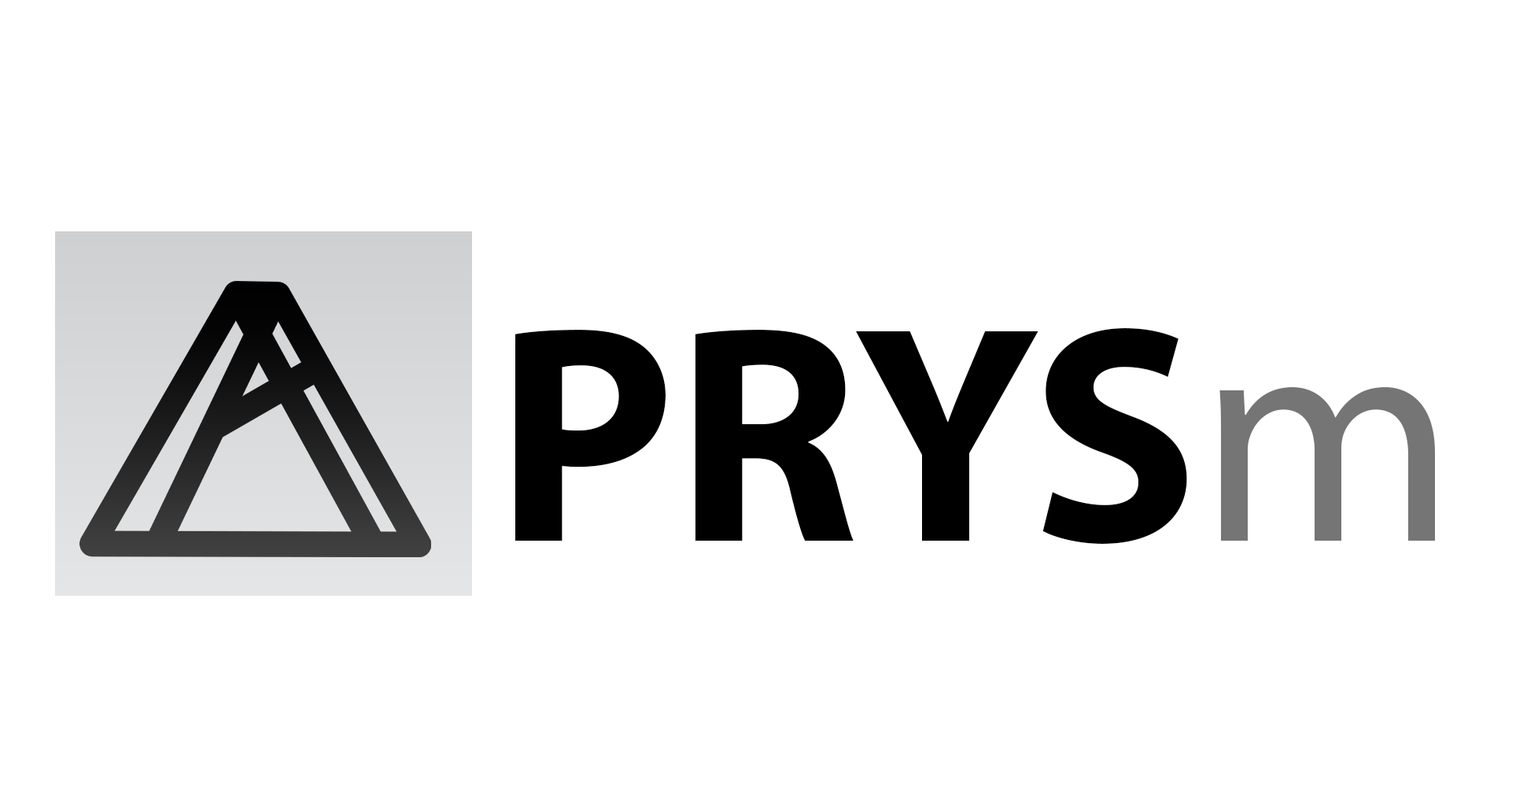
<style>
.page{position:relative;width:1516px;height:787px;background:#ffffff}
.page>*{position:absolute;margin:0}
.t1{font:310.3px "MyriadPro-Bold";color:#000000}
.t2{font:310.3px "MyriadPro-Regular";color:#757575}
</style>
<div class="page">
<p class="t1" style="left:515px;top:328px;width:920px;height:216px">PRYS<span class="t2">m</span></p>
</div>
